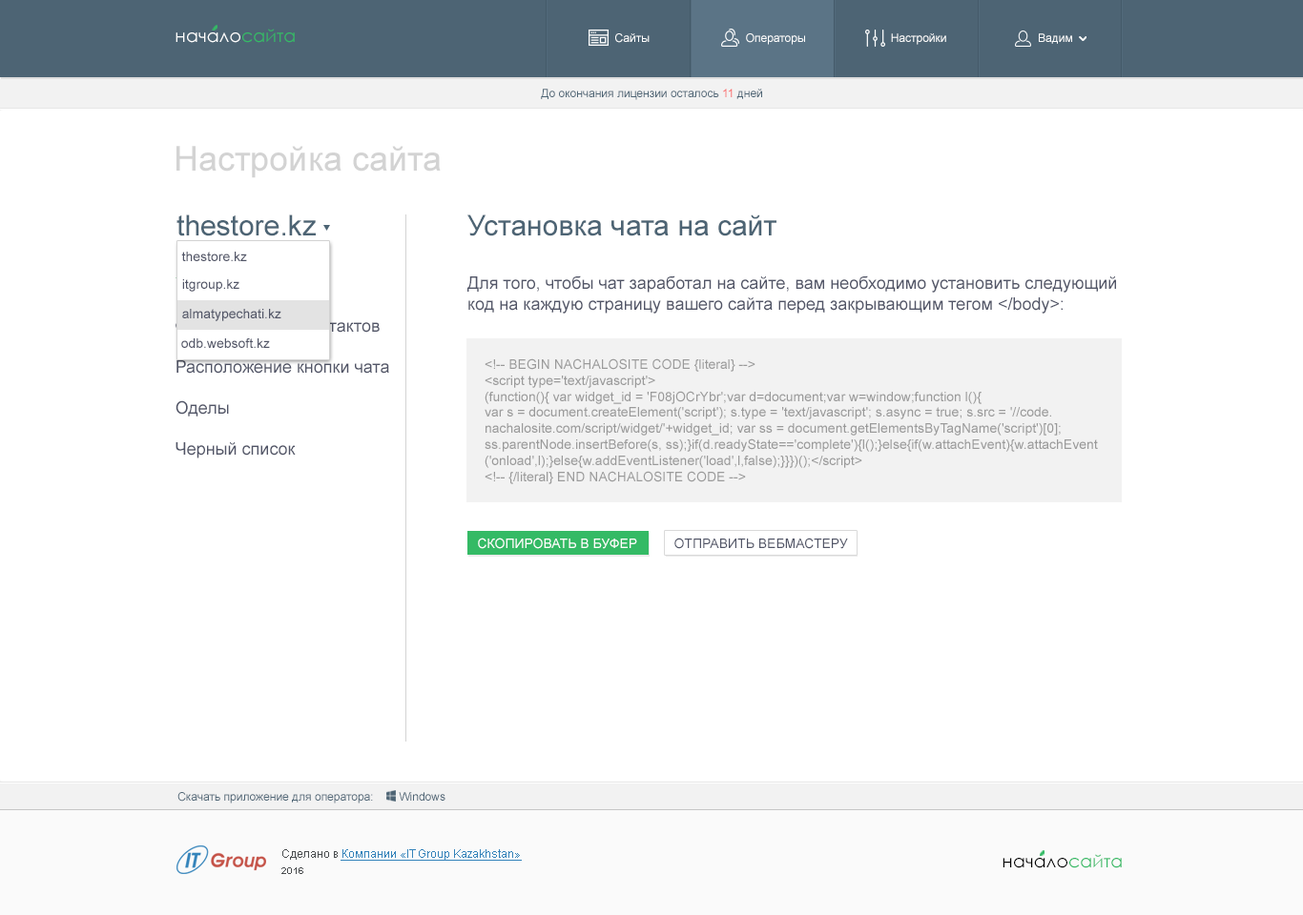
<style>
.page{position:relative;width:1303px;height:915px;background:#ffffff}
.page>*{position:absolute;margin:0}
.t1{font:17.7px "CenturyGothic";color:#ffffff}
.t2{font:17.7px "CenturyGothic";color:#34ba65}
.t3{font:11.4px "ArialMT";color:#ffffff}
.t4{font:11.4px "ArialMT";color:#4d6474}
.t5{font:11.4px "ArialMT";color:#f96969}
.t6{font:34.3px "ArialMT";color:#d3d3d3}
.t7{font:28.6px "ArialMT";color:#4d6474}
.t8{font:13.4px "ArialMT";color:#515567}
.t9{font:17.2px "ArialMT";color:#515567}
.t10{font:17.2px "ArialMT";color:#34ba65}
.t11{font:13.4px "ArialMT";color:#9a9a9a}
.t12{font:13.4px "ArialMT";color:#ffffff}
.t13{font:11.4px "ArialMT";color:#3483ba;text-decoration:underline}
.t14{font:11.4px "ArialMT";color:#4a4d4f}
.t15{font:17.7px "CenturyGothic";color:#000000}
.t16{font:9.5px "Arial-BoldMT";color:#4a4d4f}
</style>
<div class="page">
<p class="t1" style="left:175px;top:29px;width:120px;height:14px">начало<span class="t2">сайта</span></p>
<p class="t3" style="left:615px;top:33px;width:34px;height:10px">Сайты</p>
<p class="t3" style="left:746px;top:33px;width:59px;height:12px">Операторы</p>
<p class="t3" style="left:891px;top:33px;width:55px;height:12px">Настройки</p>
<p class="t3" style="left:1038px;top:33px;width:34px;height:11px">Вадим</p>
<p class="t4" style="left:541px;top:89px;width:221px;height:11px">До окончания лицензии осталось <span class="t5">11</span> дней</p>
<p class="t6" style="left:176px;top:146px;width:265px;height:32px">Настройка сайта</p>
<p class="t7" style="left:176px;top:215px;width:140px;height:21px">thestore.kz</p>
<p class="t7" style="left:467px;top:215px;width:309px;height:21px">Установка чата на сайт</p>
<p class="t8" style="left:181px;top:252px;width:66px;height:9px">thestore.kz</p>
<p class="t9" style="left:175px;top:277px;width:214px;height:182px"><span class="t10">Установка<br></span><br>Форма запроса контактов<br><br>Расположение кнопки чата<br><br>Оделы<br><br>Черный список</p>
<p class="t8" style="left:182px;top:279px;width:57px;height:13px">itgroup.kz</p>
<p class="t9" style="left:467px;top:276px;width:649px;height:38px">Для того, чтобы чат заработал на сайте, вам необходимо установить следующий <br>код на каждую страницу вашего сайта перед закрывающим тегом &lt;/body&gt;:</p>
<p class="t8" style="left:182px;top:309px;width:99px;height:12px">almatypechati.kz</p>
<p class="t8" style="left:181px;top:339px;width:89px;height:9px">odb.websoft.kz</p>
<p class="t11" style="left:484px;top:359px;width:614px;height:125px">&lt;!-- BEGIN NACHALOSITE CODE {literal} --&gt;<br>&lt;script type='text/javascript'&gt;<br>(function(){ var widget_id = 'F08jOCrYbr';var d=document;var w=window;function l(){<br>var s = document.createElement('script'); s.type = 'text/javascript'; s.async = true; s.src = '//code.<br>nachalosite.com/script/widget/'+widget_id; var ss = document.getElementsByTagName('script')[0]; <br>ss.parentNode.insertBefore(s, ss);}if(d.readyState=='complete'){l();}else{if(w.attachEvent){w.attachEvent<br>('onload',l);}else{w.addEventListener('load',l,false);}}})();&lt;/script&gt;<br>&lt;!-- {/literal} END NACHALOSITE CODE --&gt;</p>
<p class="t12" style="left:478px;top:538px;width:159px;height:11px">СКОПИРОВАТЬ В БУФЕР</p>
<p class="t8" style="left:674px;top:538px;width:174px;height:11px">ОТПРАВИТЬ ВЕБМАСТЕРУ</p>
<p class="t4" style="left:177px;top:792px;width:268px;height:12px">Скачать приложение для оператора:        Windows</p>
<p class="t13" style="left:282px;top:850px;width:240px;height:11px"><span class="t14">Сделано в </span>Компании «IT Group Kazakhstan»</p>
<p class="t15" style="left:1002px;top:854px;width:119px;height:15px">начало<span class="t2">сайта</span></p>
<p class="t16" style="left:281px;top:868px;width:22px;height:6px">2016</p>
</div>
